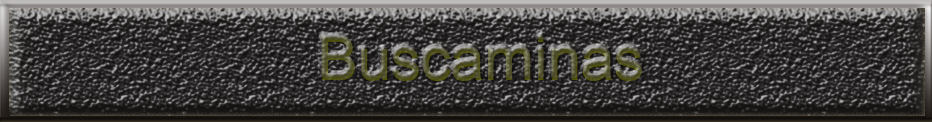
<style>
.page{position:relative;width:932px;height:122px}
.page>*{position:absolute;margin:0}
.t1{font:60px "ArialMT"}
</style>
<div class="page">
<p class="t1" style="left:321px;top:35px;width:321px;height:44px">Buscaminas</p>
</div>
